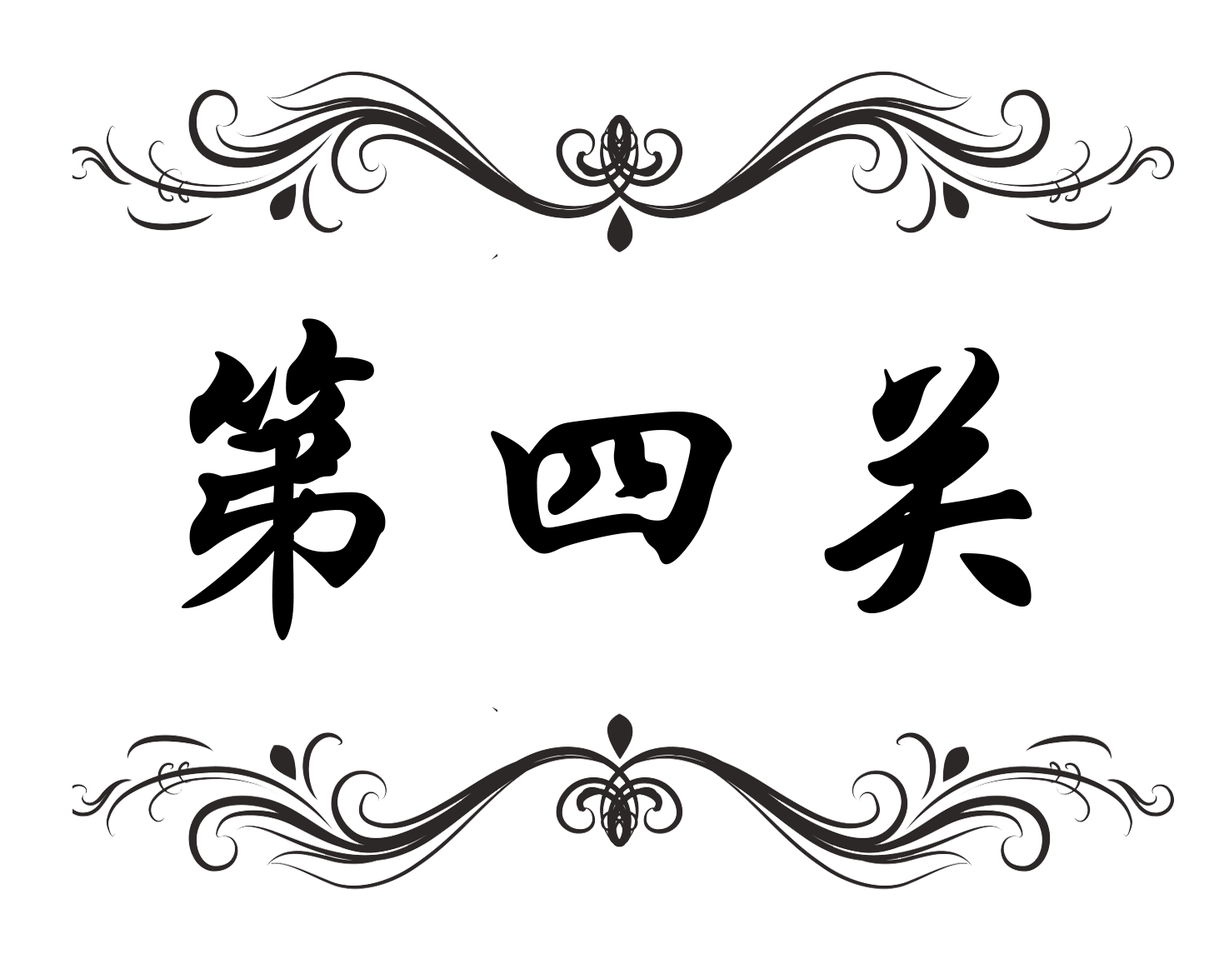
<style>
.page{position:relative;width:1224px;height:974px;background:#ffffff}
.page>*{position:absolute;margin:0}
.t1{font:333.3px "STXingkai";color:#000000}
</style>
<div class="page">
<p class="t1" style="left:182px;top:318px;width:850px;height:323px">第四关</p>
</div>
